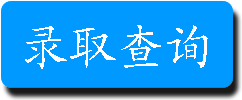
<style>
.page{position:relative;width:242px;height:100px;background:#0099ff}
.page>*{position:absolute;margin:0}
.t1{font:48px "KaiTi_GB2312";color:#ffffff}
</style>
<div class="page">
<p class="t1" style="left:25px;top:25px;width:183px;height:44px">录取查询</p>
</div>
